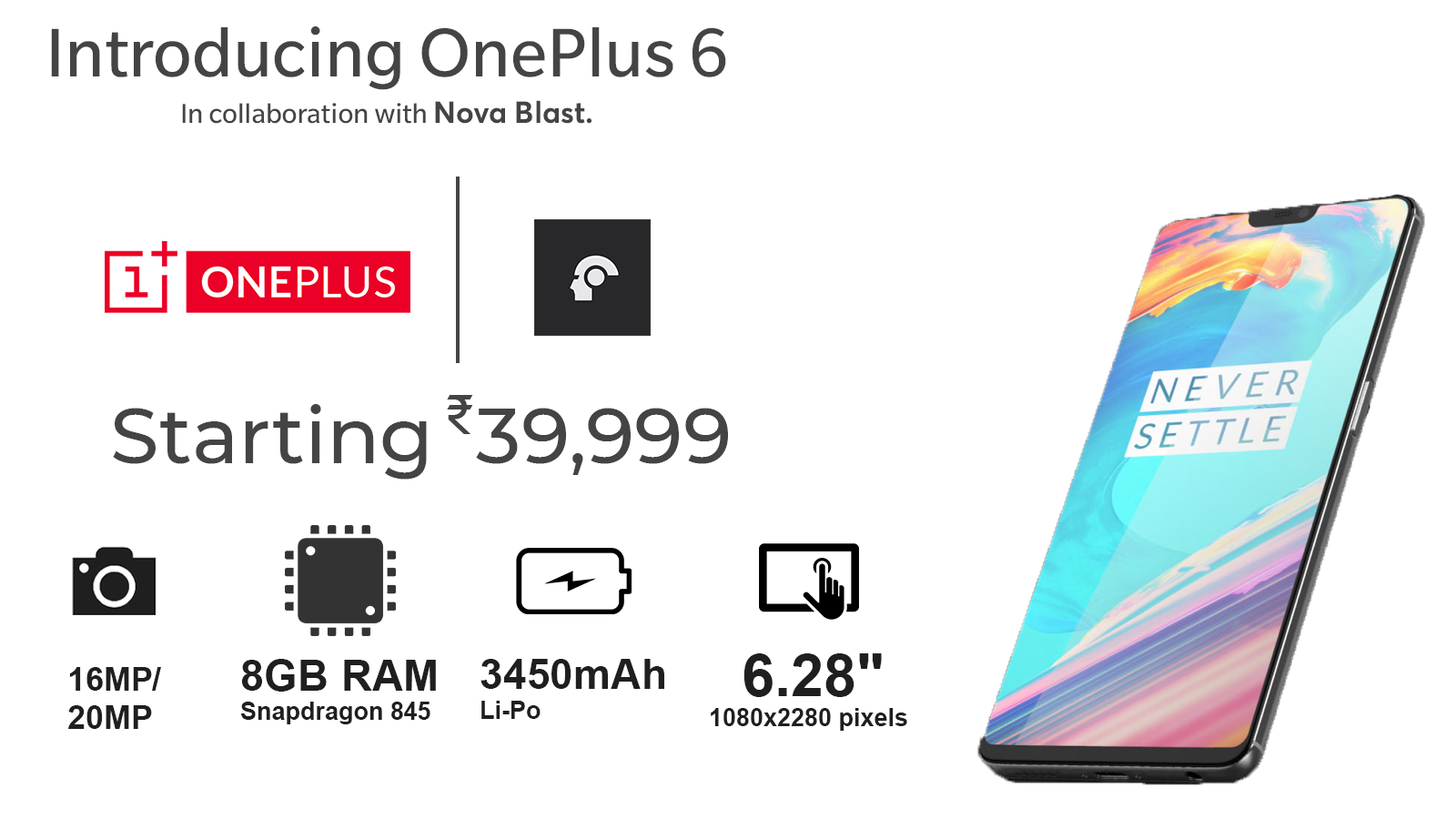
<style>
.page{position:relative;width:1456px;height:819px;background:#ffffff}
.page>*{position:absolute;margin:0}
.t1{font:66.4px "SlateForOnePlus-Regular";color:#444444}
.t2{font:26.4px "SlateForOnePlus-Regular";color:#444444}
.t3{font:30px "Averta-Bold";color:#444444}
.t4{font:54.2px "ArialMT";color:#444444}
.t5{font:78.8px "Montserrat-Medium";color:#444444}
.t6{font:24.5px "Arial-BoldMT";color:#1f1f1f}
.t7{font:58.8px "Arial-BoldMT";color:#1f1f1f}
.t8{font:43.2px "Arial-BoldMT";color:#1f1f1f}
.t9{font:42.2px "Arial-BoldMT";color:#1f1f1f}
.t10{font:32.4px "Arial-BoldMT";color:#1f1f1f}
</style>
<div class="page">
<p class="t1" style="left:51px;top:26px;width:675px;height:64px">Introducing OnePlus 6</p>
<p class="t2" style="left:182px;top:100px;width:409px;height:24px">In collaboration with <span class="t3">Nova Blast.</span></p>
<p class="t4" style="left:447px;top:395px;width:26px;height:39px">₹</p>
<p class="t5" style="left:113px;top:404px;width:615px;height:76px">Starting  39,999</p>
<p class="t6" style="left:711px;top:653px;width:196px;height:78px"><span class="t7">  6.28"<br></span>1080x2280 pixels</p>
<p class="t6" style="left:240px;top:659px;width:196px;height:65px"><span class="t8">8GB RAM<br></span>Snapdragon 845</p>
<p class="t9" style="left:480px;top:659px;width:184px;height:60px">3450mAh<br><span class="t6">Li-Po</span></p>
<p class="t10" style="left:68px;top:667px;width:93px;height:62px">16MP/<br>20MP</p>
</div>
